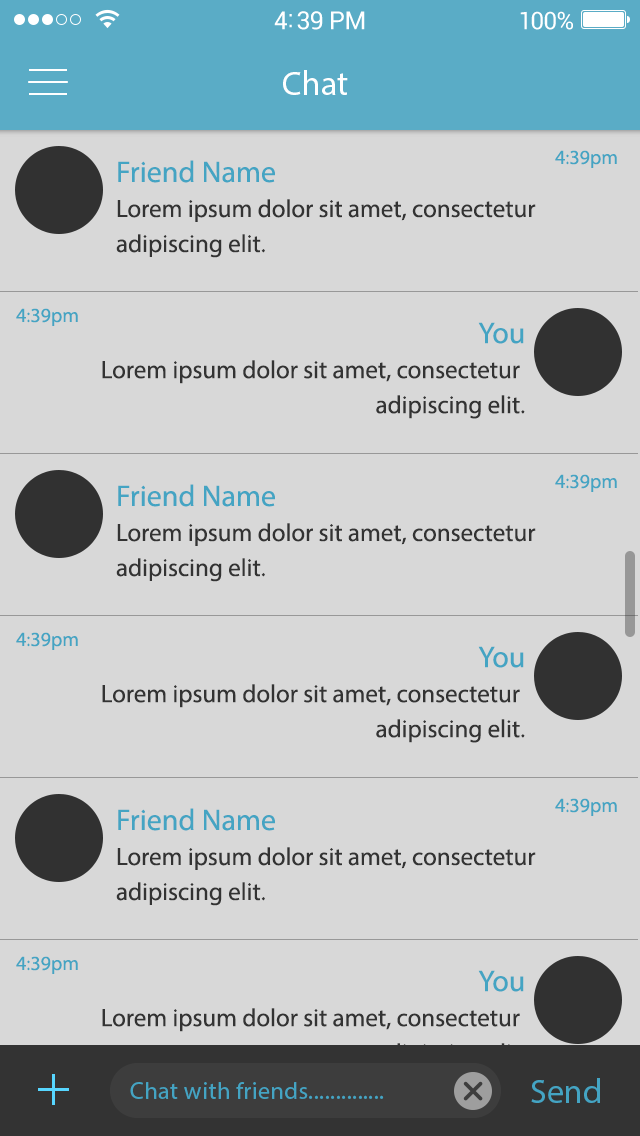
<style>
.page{position:relative;width:640px;height:1136px;background:#d8d8d8}
.page>*{position:absolute;margin:0}
.t1{font:34px "MyriadPro-Regular";color:#ffffff}
.t2{font:20px "MyriadPro-Regular";color:#44a4c3}
.t3{font:25px/35px "MyriadPro-Regular";color:#333333}
.t4{font:30px/35px "MyriadPro-Regular";color:#44a4c3}
.t5{font:25px/35.1px "MyriadPro-Regular";color:#333333}
.t6{font:30px/35.1px "MyriadPro-Regular";color:#44a4c3}
.t7{font:24px "MyriadPro-Regular";letter-spacing:0.02em;color:#44a4c3}
.t8{font:34px "MyriadPro-Regular";color:#44a4c3}
</style>
<div class="page">
<p class="t1" style="left:283px;top:70px;width:65px;height:25px">Chat</p>
<p class="t2" style="left:555px;top:150px;width:62px;height:18px">4:39pm</p>
<p class="t3" style="left:116px;top:160px;width:420px;height:98px"><span class="t4">Friend Name <br></span>Lorem ipsum dolor sit amet, consectetur <br>adipiscing elit.</p>
<p class="t2" style="left:16px;top:308px;width:62px;height:18px">4:39pm</p>
<p class="t5" style="left:102px;top:322px;width:423px;height:97px;text-align:right"><span class="t6">You<br></span>Lorem ipsum dolor sit amet, consectetur <br>adipiscing elit.</p>
<p class="t3" style="left:116px;top:484px;width:420px;height:98px"><span class="t4">Friend Name <br></span>Lorem ipsum dolor sit amet, consectetur <br>adipiscing elit.</p>
<p class="t2" style="left:555px;top:474px;width:62px;height:18px">4:39pm</p>
<p class="t2" style="left:16px;top:632px;width:62px;height:18px">4:39pm</p>
<p class="t5" style="left:102px;top:646px;width:423px;height:97px;text-align:right"><span class="t6">You<br></span>Lorem ipsum dolor sit amet, consectetur <br>adipiscing elit.</p>
<p class="t2" style="left:555px;top:798px;width:62px;height:18px">4:39pm</p>
<p class="t3" style="left:116px;top:808px;width:420px;height:98px"><span class="t4">Friend Name <br></span>Lorem ipsum dolor sit amet, consectetur <br>adipiscing elit.</p>
<p class="t2" style="left:16px;top:956px;width:62px;height:18px">4:39pm</p>
<p class="t5" style="left:102px;top:970px;width:423px;height:97px;text-align:right"><span class="t6">You<br></span>Lorem ipsum dolor sit amet, consectetur <br>adipiscing elit.</p>
<p class="t7" style="left:130px;top:1082px;width:254px;height:17px">Chat with friends..............</p>
<p class="t8" style="left:531px;top:1078px;width:69px;height:25px">Send</p>
</div>
